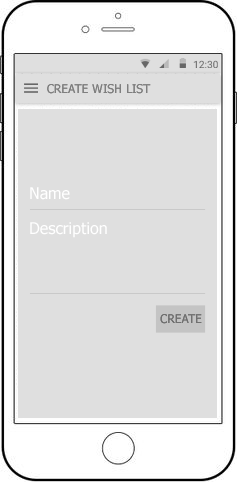
<style>
.page{position:relative;width:237px;height:482px;background:#dfdfdf}
.page>*{position:absolute;margin:0}
.t1{font:12px "Tahoma";color:#7f7f7f}
.t2{font:16px/35px "Tahoma";color:#ffffff}
</style>
<div class="page">
<p class="t1" style="left:47px;top:84px;width:104px;height:10px">CREATE WISH LIST</p>
<p class="t2" style="left:30px;top:187px;width:77px;height:51px">Name<br>Description</p>
<p class="t1" style="left:160px;top:314px;width:42px;height:10px">CREATE</p>
</div>
